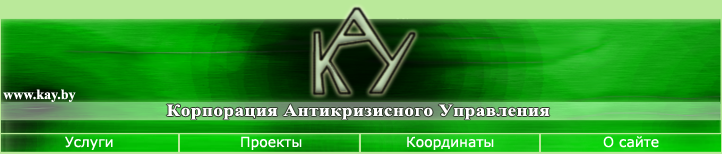
<style>
.page{position:relative;width:722px;height:154px}
.page>*{position:absolute;margin:0}
.t1{font:14px "TimesNewRomanPS-BoldMT";color:#ffffff}
.t2{font:16.8px "TimesNewRomanPS-BoldMT";letter-spacing:0.025em;color:#ffffff;scale:1.14 1}
.t3{font:14px "Verdana";color:#ffffff}
</style>
<div class="page">
<p class="t1" style="left:3px;top:89px;width:73px;height:13px">www.kay.by</p>
<p class="t2" style="left:166px;top:104px;width:384px;height:16px">Корпорация Антикризисного Управления</p>
<p class="t3" style="left:65px;top:136px;width:48px;height:14px">Услуги</p>
<p class="t3" style="left:241px;top:136px;width:61px;height:14px">Проекты</p>
<p class="t3" style="left:407px;top:136px;width:87px;height:14px">Координаты</p>
<p class="t3" style="left:603px;top:136px;width:56px;height:12px">О сайте</p>
</div>
